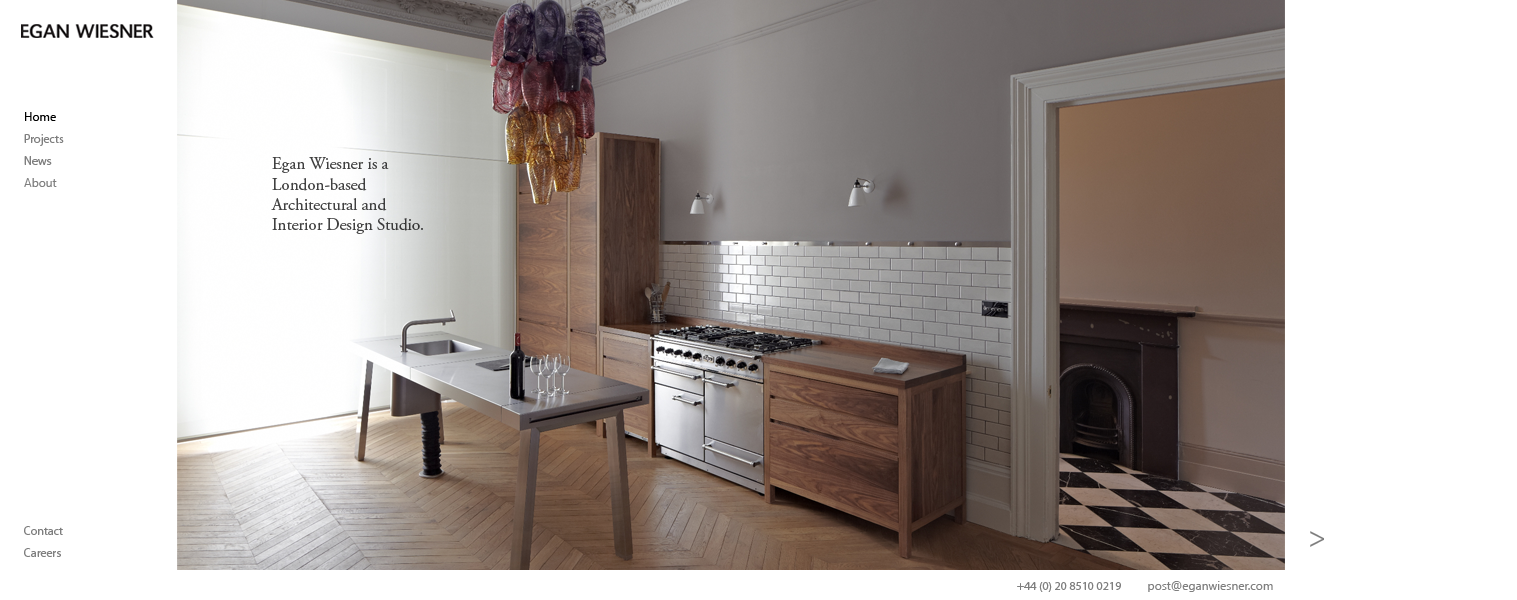
<style>
.page{position:relative;width:1517px;height:600px;background:#ffffff}
.page>*{position:absolute;margin:0}
.t1{font:12px "KhmerUI";color:#000000}
.t2{font:12px "MyriadPro-Regular";color:#7f7f7f}
.t3{font:17px "AGaramondPro-Regular";color:#404040}
.t4{font:16px "AGaramondPro-Regular";color:#404040}
.t5{font:12px "KhmerUI";color:#7f7f7f}
.t6{font:30px "MyriadPro-Regular";color:#7f7f7f}
</style>
<div class="page">
<p class="t1" style="left:25px;top:112px;width:31px;height:9px">Home</p>
<p class="t2" style="left:24px;top:134px;width:40px;height:12px">Projects</p>
<p class="t2" style="left:24px;top:156px;width:28px;height:9px">News</p>
<p class="t3" style="left:271px;top:157px;width:152px;height:77px">Egan Wiesner is a London-based <br>Architectural and <br>Interior Design Studio<span class="t4">.</span></p>
<p class="t5" style="left:24px;top:178px;width:33px;height:9px">About</p>
<p class="t2" style="left:24px;top:526px;width:39px;height:9px">Contact</p>
<p class="t6" style="left:1310px;top:531px;width:14px;height:16px">&gt;</p>
<p class="t2" style="left:24px;top:548px;width:37px;height:9px">Careers</p>
<p class="t2" style="left:1017px;top:582px;width:104px;height:10px">+44 (0) 20 8510 0219   ~  post@eganwiesner.com</p>
<p class="t5" style="left:1148px;top:581px;width:125px;height:11px">post@eganwiesner.com</p>
</div>
